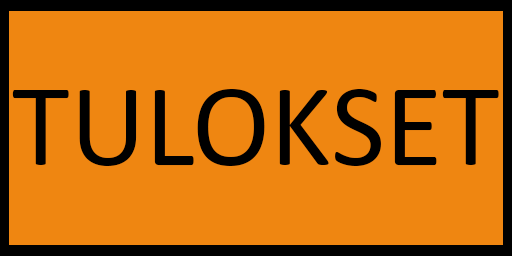
<style>
.page{position:relative;width:512px;height:256px;background:#ef8611}
.page>*{position:absolute;margin:0}
.t1{font:118px "Calibri";color:#000000}
</style>
<div class="page">
<p class="t1" style="left:12px;top:89px;width:487px;height:77px">TULOKSET</p>
</div>
